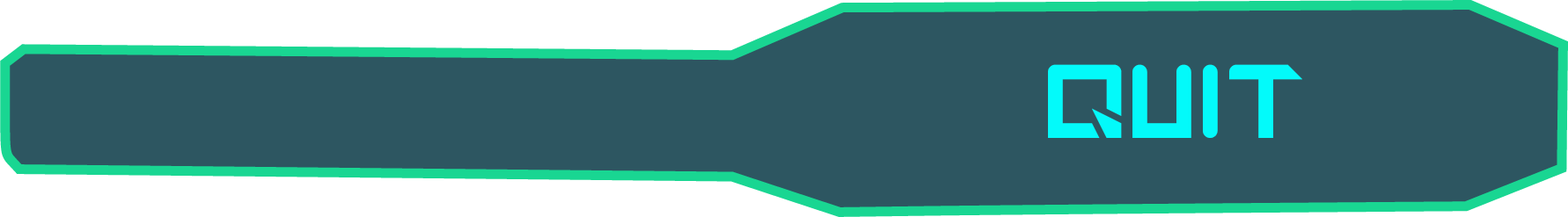
<style>
.page{position:relative;width:1568px;height:217px;background:#2d5661}
.page>*{position:absolute;margin:0}
.t1{font:73.3px "Astro";color:#03fafa}
</style>
<div class="page">
<p class="t1" style="left:1048px;top:64px;width:254px;height:74px">quit</p>
</div>
